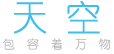
<style>
.page{position:relative;width:114px;height:54px;background:#ffffff}
.page>*{position:absolute;margin:0}
.t1{font:36px "YouYuan";color:#3fbded}
.t2{font:12px "YouYuan";color:#b6b6b6}
</style>
<div class="page">
<p class="t1" style="left:14px;top:0px;width:86px;height:34px">天 空</p>
<p class="t2" style="left:3px;top:38px;width:108px;height:12px">包  容  着  万  物</p>
</div>
